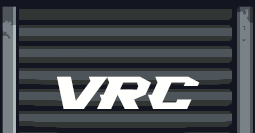
<style>
.page{position:relative;width:255px;height:133px;background:#313534}
.page>*{position:absolute;margin:0}
.t1{font:46.2px "Spiky016Regular";color:#fffffe}
</style>
<div class="page">
<p class="t1" style="left:57px;top:76px;width:143px;height:33px">VRC</p>
</div>
